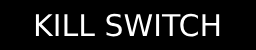
<style>
.page{position:relative;width:256px;height:50px;background:#000000}
.page>*{position:absolute;margin:0}
.t1{font:30px "DejaVuSans";color:#ffffff}
</style>
<div class="page">
<p class="t1" style="left:35px;top:13px;width:185px;height:24px">KILL SWITCH</p>
</div>
